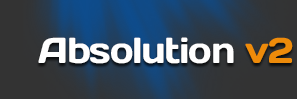
<style>
.page{position:relative;width:297px;height:99px}
.page>*{position:absolute;margin:0}
.t1{font:36px "DaysOne-Regular";letter-spacing:-0.035em;color:#ffffff}
.t2{font:36px "DaysOne-Regular";letter-spacing:-0.035em;color:#ee8b0a}
</style>
<div class="page">
<p class="t1" style="left:38px;top:37px;width:255px;height:27px">Absolution <span class="t2">v2</span></p>
</div>
